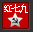
<style>
.page{position:relative;width:33px;height:32px;background:#c50000}
.page>*{position:absolute;margin:0}
.t1{font:10.4px "SimSun";letter-spacing:-0.25em;color:#ffffff}
</style>
<div class="page">
<p class="t1" style="left:4px;top:4px;width:24px;height:9px">红七九</p>
</div>
